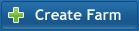
<style>
.page{position:relative;width:139px;height:31px}
.page>*{position:absolute;margin:0}
.t1{font:15px "TrebuchetMS-Bold";color:#f1f5f8}
</style>
<div class="page">
<p class="t1" style="left:35px;top:9px;width:86px;height:11px">Create Farm</p>
</div>
